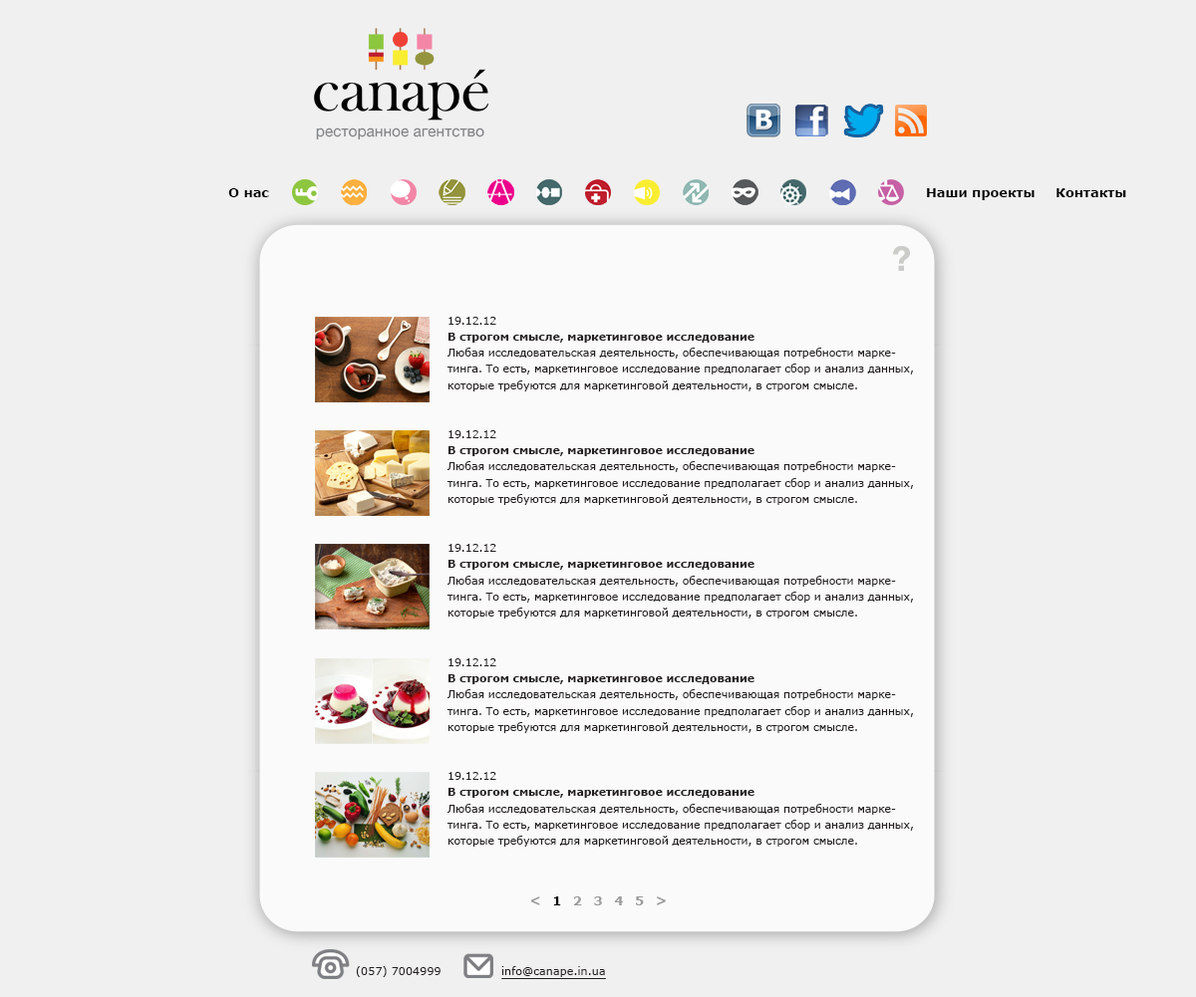
<style>
.page{position:relative;width:1196px;height:997px;background:#f0f0f0}
.page>*{position:absolute;margin:0}
.t1{font:12.9px "Verdana-Bold";color:#000000}
.t2{font:11.2px/16.3px "Verdana";letter-spacing:-0.02em;color:#231f20}
.t3{font:11.2px/16.3px "Verdana-Bold";letter-spacing:-0.02em;color:#231f20}
.t4{font:12.5px "Verdana-Bold";letter-spacing:-0.02em;color:#9b9b9b}
.t5{font:12.5px "Verdana-Bold";letter-spacing:-0.02em;color:#000000}
.t6{font:11.2px "Verdana";color:#231f20}
</style>
<div class="page">
<p class="t1" style="left:228px;top:188px;width:41px;height:9px">О нас</p>
<p class="t1" style="left:927px;top:188px;width:107px;height:12px">Наши проекты</p>
<p class="t1" style="left:1056px;top:188px;width:70px;height:9px">Контакты</p>
<p class="t2" style="left:446px;top:317px;width:468px;height:530px">19.12.12<br><span class="t3">В строгом смысле, маркетинговое исследование</span><br>Любая исследовательская деятельность, обеспечивающая потребности марке-<br>тинга. То есть, маркетинговое исследование предполагает сбор и анализ данных,<br>которые требуются для маркетинговой деятельности, в строгом смысле.<br><br><br>19.12.12<br><span class="t3">В строгом смысле, маркетинговое исследование</span><br>Любая исследовательская деятельность, обеспечивающая потребности марке-<br>тинга. То есть, маркетинговое исследование предполагает сбор и анализ данных,<br>которые требуются для маркетинговой деятельности, в строгом смысле.<br><br><br>19.12.12<br><span class="t3">В строгом смысле, маркетинговое исследование</span><br>Любая исследовательская деятельность, обеспечивающая потребности марке-<br>тинга. То есть, маркетинговое исследование предполагает сбор и анализ данных,<br>которые требуются для маркетинговой деятельности, в строгом смысле.<br><br><br>19.12.12<br><span class="t3">В строгом смысле, маркетинговое исследование</span><br>Любая исследовательская деятельность, обеспечивающая потребности марке-<br>тинга. То есть, маркетинговое исследование предполагает сбор и анализ данных,<br>которые требуются для маркетинговой деятельности, в строгом смысле.<br><br><br>19.12.12<br><span class="t3">В строгом смысле, маркетинговое исследование</span><br>Любая исследовательская деятельность, обеспечивающая потребности марке-<br>тинга. То есть, маркетинговое исследование предполагает сбор и анализ данных,<br>которые требуются для маркетинговой деятельности, в строгом смысле.</p>
<p class="t4" style="left:530px;top:897px;width:136px;height:9px">&lt;   <span class="t5">1</span>   2   3   4   5   &gt;</p>
<p class="t6" style="left:356px;top:966px;width:84px;height:11px">(057) 7004999</p>
<p class="t6" style="left:501px;top:966px;width:104px;height:11px">info@canape.in.ua</p>
</div>
